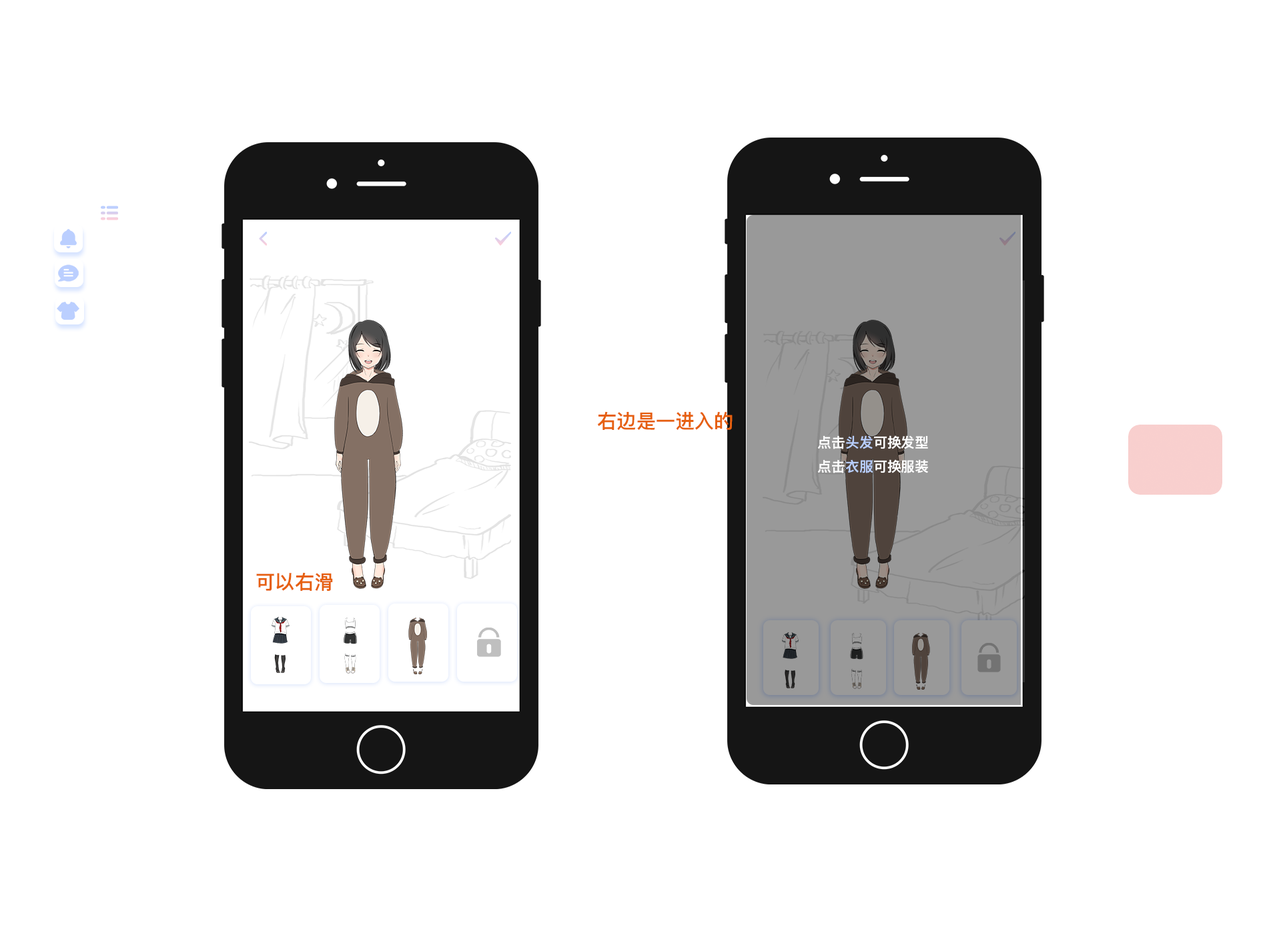
<style>
.page{position:relative;width:1261px;height:946px;background:#ffffff}
.page>*{position:absolute;margin:0}
.t1{font:19.5px "PingFangSC-Semibold";color:#e6600f}
.t2{font:13.9px "PingFangSC-Semibold";color:#fefefe}
.t3{font:13.9px "PingFangSC-Semibold";color:#b9cfff}
</style>
<div class="page">
<p class="t1" style="left:597px;top:411px;width:136px;height:19px">右边是一进入的</p>
<p class="t2" style="left:817px;top:435px;width:111px;height:38px">点击<span class="t3">头发</span>可换发型<br>点击<span class="t3">衣服</span>可换服装</p>
<p class="t1" style="left:256px;top:572px;width:77px;height:19px">可以右滑</p>
</div>
